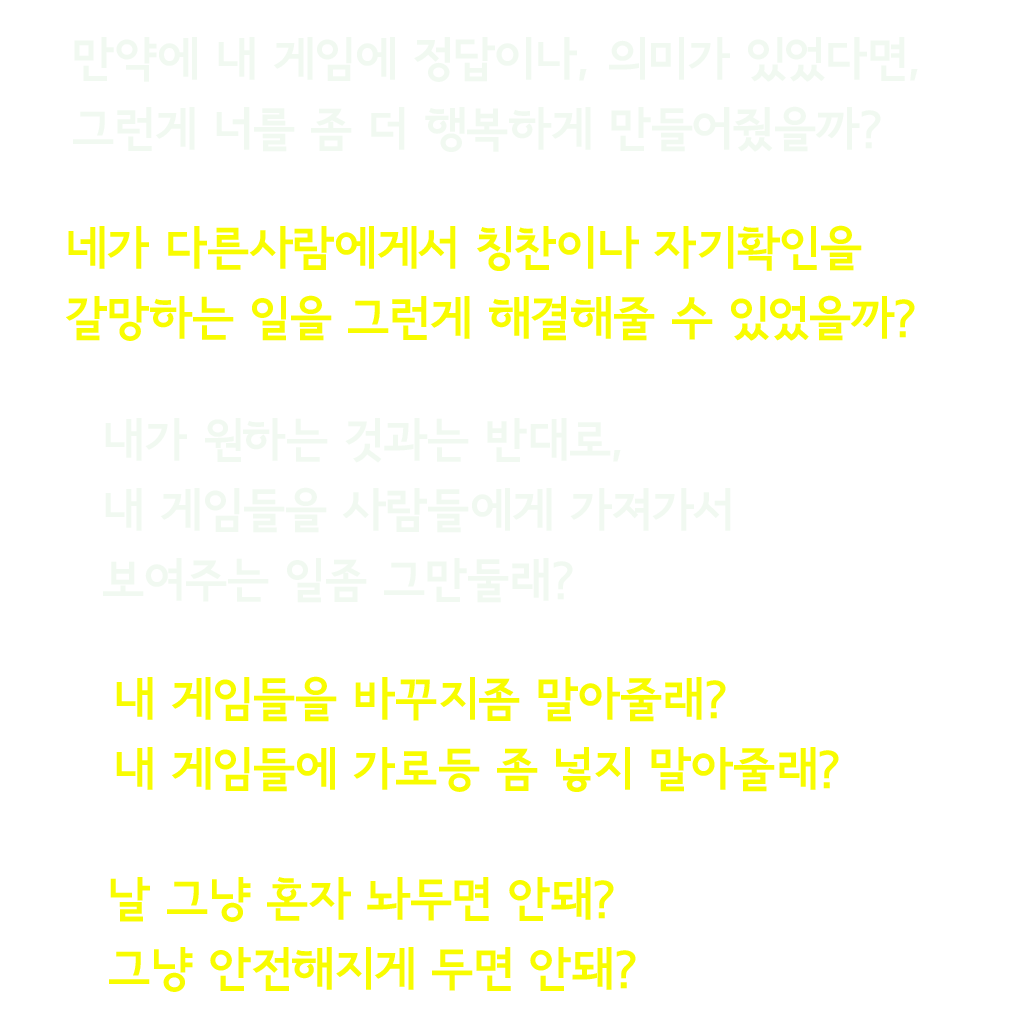
<style>
.page{position:relative;width:1024px;height:1024px;background:#ffffff}
.page>*{position:absolute;margin:0}
.t1{font:47px/70px "SeoulNamsanEB";color:#f1f9f1}
.t2{font:47px/70px "SeoulNamsanEB";color:#f8fc00}
</style>
<div class="page">
<p class="t1" style="left:73px;top:37px;width:845px;height:115px">만약에 내 게임에 정답이나, 의미가 있었다면,<br>그런게 너를 좀 더 행복하게 만들어줬을까?</p>
<p class="t2" style="left:66px;top:225px;width:849px;height:116px">네가 다른사람에게서 칭찬이나 자기확인을 갈망하는 일을 그런게 해결해줄 수 있었을까?</p>
<p class="t1" style="left:103px;top:418px;width:628px;height:185px">내가 원하는 것과는 반대로,<br>내 게임들을 사람들에게 가져가서<br>보여주는 일좀 그만둘래?</p>
<p class="t2" style="left:116px;top:676px;width:723px;height:116px">내 게임들을 바꾸지좀 말아줄래?<br>내 게임들에 가로등 좀 넣지 말아줄래?</p>
<p class="t2" style="left:109px;top:877px;width:527px;height:115px">날 그냥 혼자 놔두면 안돼?<br>그냥 안전해지게 두면 안돼?</p>
</div>
